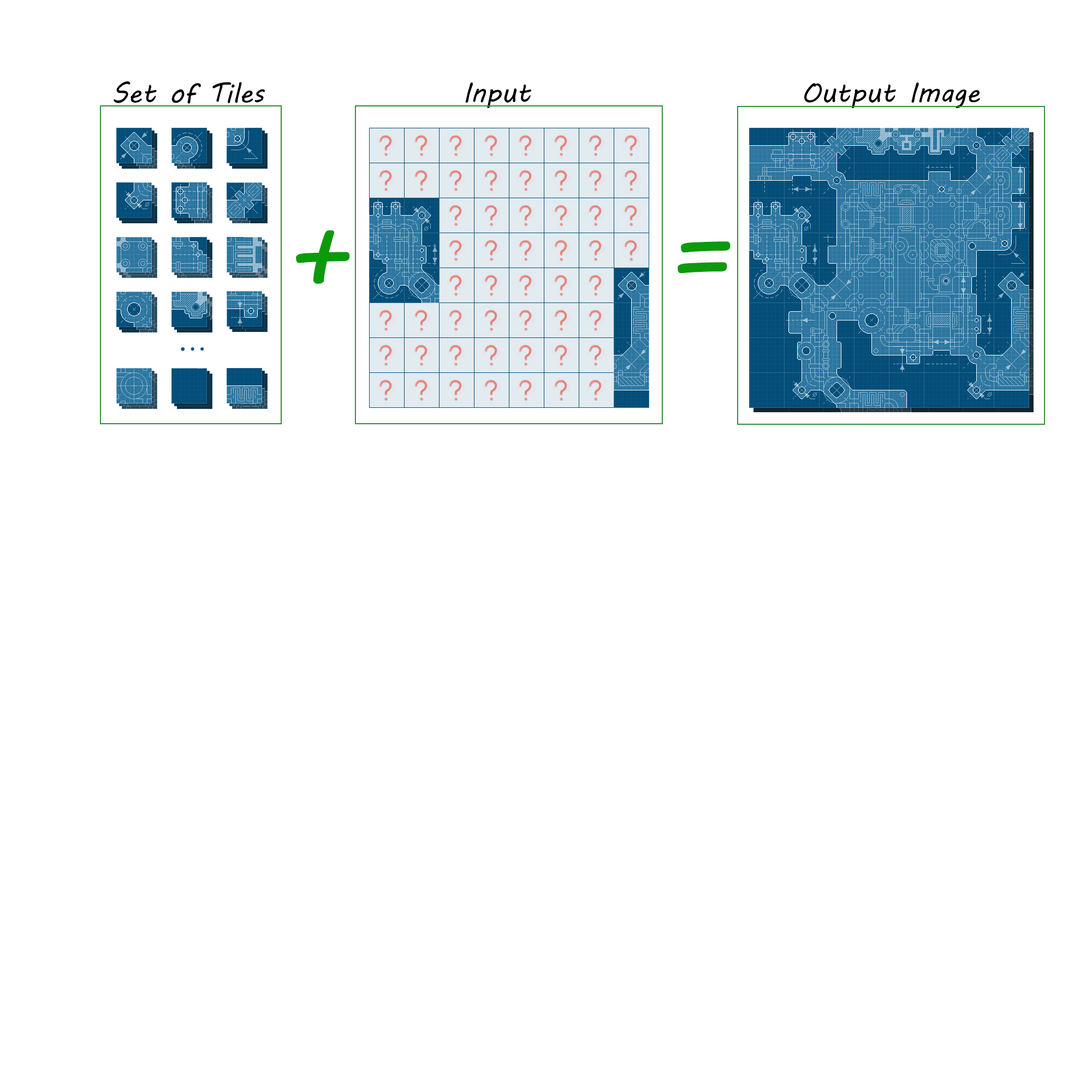
<style>
.page{position:relative;width:1092px;height:1092px;background:#ffffff}
.page>*{position:absolute;margin:0}
.t1{font:27.3px "MVBoli";color:#000000}
.t2{font:109.2px "MVBoli";color:#0c9a0c}
</style>
<div class="page">
<p class="t1" style="left:114px;top:81px;width:151px;height:23px">Set of Tiles</p>
<p class="t1" style="left:465px;top:82px;width:66px;height:26px">Input</p>
<p class="t1" style="left:804px;top:82px;width:176px;height:26px">Output Image</p>
<p class="t2" style="left:296px;top:230px;width:435px;height:54px">+      =</p>
</div>
